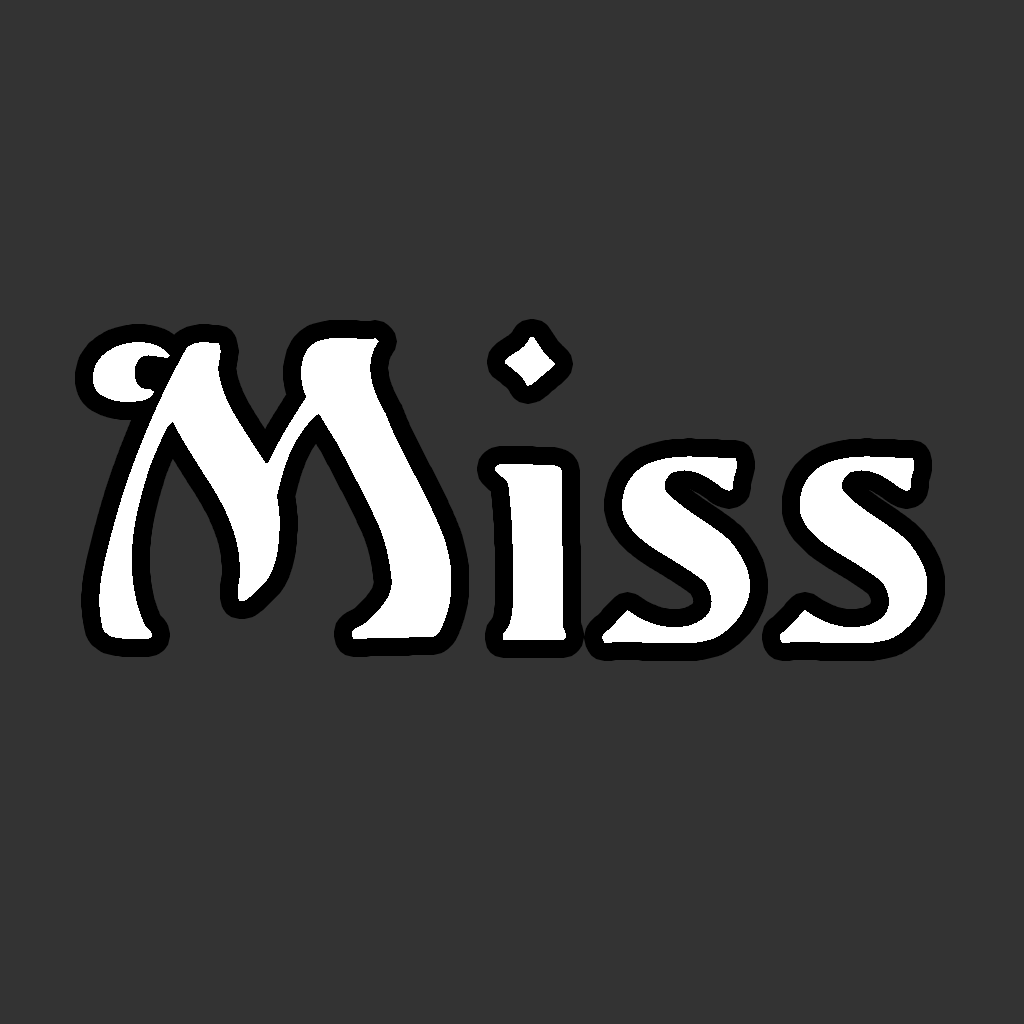
<style>
.page{position:relative;width:1024px;height:1024px;background:#333333}
.page>*{position:absolute;margin:0}
.t1{font:403.9px "Argos-Regular";letter-spacing:0.01em;color:#ffffff}
</style>
<div class="page">
<p class="t1" style="left:93px;top:337px;width:834px;height:306px">Miss</p>
</div>
